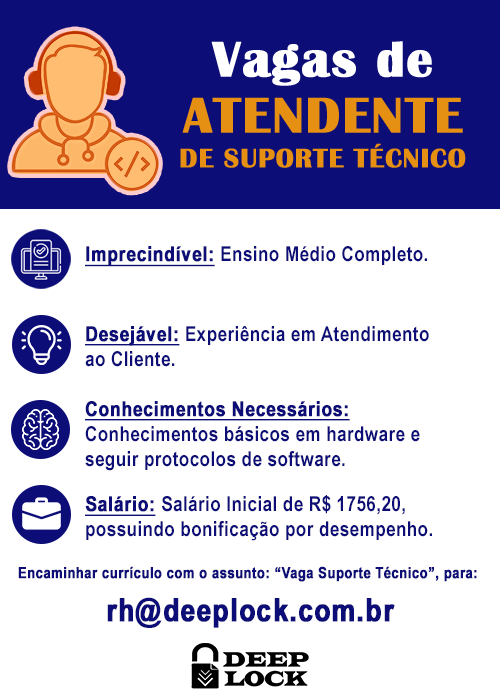
<style>
.page{position:relative;width:500px;height:700px;background:#ffffff}
.page>*{position:absolute;margin:0}
.t1{font:51.6px "BritannicBold";letter-spacing:0.02em;color:#ffffff;font-weight:bold}
.t2{font:27.3px/35.3px "BritannicBold";letter-spacing:0.02em;color:#e59012;font-weight:bold}
.t3{font:51.6px/35.3px "BritannicBold";letter-spacing:0.02em;color:#e59012;font-weight:bold}
.t4{font:20.8px "ArialNarrow-Bold";letter-spacing:0.02em;color:#0d0d78}
.t5{font:20.8px "ArialNarrow-Bold";letter-spacing:0.02em;color:#0d0d78;font-weight:bold;text-decoration:underline}
.t6{font:15.4px "ArialNarrow-Bold";letter-spacing:0.02em;color:#0d0d78;font-weight:bold}
.t7{font:32.1px "ArialNarrow-Bold";letter-spacing:0.02em;color:#0d0d78;font-weight:bold}
</style>
<div class="page">
<p class="t1" style="left:211px;top:41px;width:221px;height:45px">Vagas de</p>
<p class="t2" style="left:180px;top:97px;width:286px;height:71px;text-align:center"><span class="t3">ATENDENTE<br></span>DE SUPORTE TÉCNICO</p>
<p class="t4" style="left:85px;top:246px;width:342px;height:21px"><span class="t5">Imprecindível: </span>Ensino Médio Completo.</p>
<p class="t4" style="left:85px;top:326px;width:344px;height:41px"><span class="t5">Desejável: </span>Experiência em Atendimento             ao Cliente.</p>
<p class="t4" style="left:85px;top:401px;width:335px;height:70px"><span class="t5">Conhecimentos Necessários: </span>Conhecimentos básicos em hardware e seguir protocolos de software.</p>
<p class="t4" style="left:85px;top:495px;width:347px;height:46px"><span class="t5">Salário: </span>Salário Inicial de R$ 1756,20, possuindo bonificação por desempenho.</p>
<p class="t6" style="left:18px;top:566px;width:459px;height:16px">Encaminhar currículo com o assunto: “Vaga Suporte Técnico”, para:</p>
<p class="t7" style="left:107px;top:597px;width:288px;height:31px">rh@deeplock.com.br</p>
</div>
